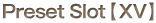
<style>
.page{position:relative;width:156px;height:23px;background:#ffffff}
.page>*{position:absolute;margin:0}
.t1{font:18px "GothicMB101Pro-DeBold";letter-spacing:-0.04em}
</style>
<div class="page">
<p class="t1" style="left:3px;top:2px;width:151px;height:19px">Preset Slot【      】</p>
<p class="t1" style="left:119px;top:4px;width:28px;height:15px">XV</p>
</div>
